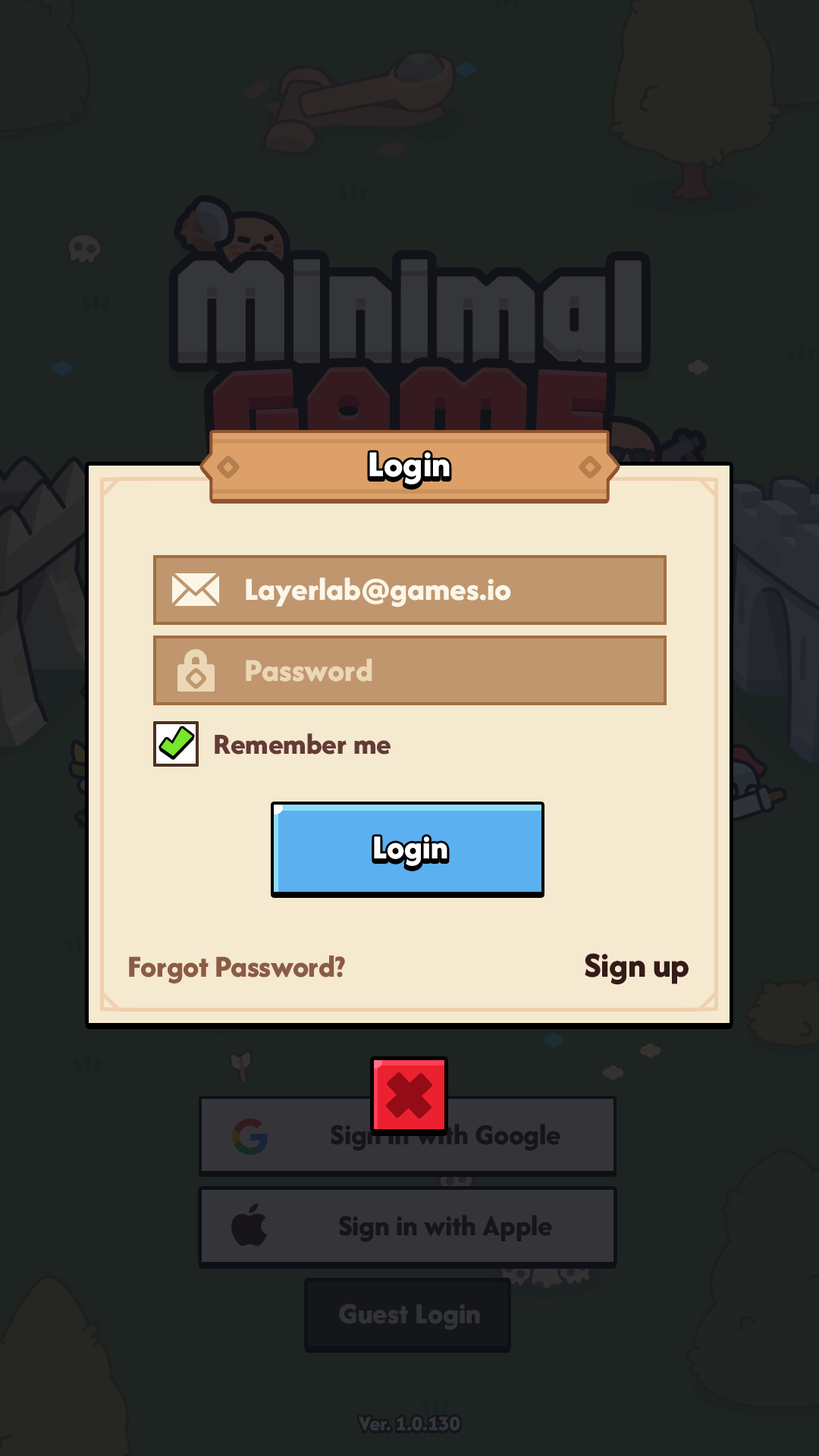
<style>
.page{position:relative;width:819px;height:1456px;background:#1e2422}
.page>*{position:absolute;margin:0}
.t1{font:37.9px "AfacadFlux-ExtraBold";color:#ffffff}
.t2{font:33.4px "AfacadFlux-ExtraBold";color:#fbf6e8}
.t3{font:33.4px "AfacadFlux-ExtraBold";color:#ebd7b6}
.t4{font:30.3px "AfacadFlux-ExtraBold";color:#633b37}
.t5{font:34.9px "AfacadFlux-ExtraBold";letter-spacing:0.01em;color:#ffffff}
.t6{font:36.4px "AfacadFlux-ExtraBold";letter-spacing:-0.01em;color:#341b19}
.t7{font:31.8px "AfacadFlux-ExtraBold";letter-spacing:-0.01em;color:#8b5c45}
</style>
<div class="page">
<p class="t1" style="left:369px;top:452px;width:81px;height:33px">Login</p>
<p class="t2" style="left:246px;top:577px;width:265px;height:30px">Layerlab@games.io</p>
<p class="t3" style="left:246px;top:658px;width:126px;height:24px">Password</p>
<p class="t4" style="left:215px;top:733px;width:176px;height:22px">Remember me</p>
<p class="t5" style="left:374px;top:836px;width:73px;height:30px">Login</p>
<p class="t6" style="left:585px;top:953px;width:104px;height:32px">Sign up</p>
<p class="t7" style="left:129px;top:955px;width:216px;height:29px">Forgot Password?</p>
</div>
